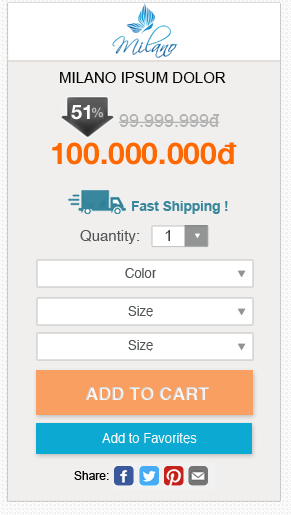
<style>
.page{position:relative;width:291px;height:515px;background:#f0efee}
.page>*{position:absolute;margin:0}
.t1{font:15px "ArialMT";color:#020202;text-transform:uppercase}
.t2{font:20px "HelveticaNeue-Bold";color:#ffffff}
.t3{font:13px "HelveticaNeue-Bold";color:#bcbcbc}
.t4{font:18px "ArialMT";color:#b3b2b2}
.t5{font:30px "HelveticaNeue-Bold";color:#ff6800}
.t6{font:13.5px "Arial-BoldMT";color:#3a879c}
.t7{font:15px "Helvetica";color:#515555}
.t8{font:15px "ArialMT";color:#343434}
.t9{font:13px "Helvetica";color:#515555}
.t10{font:18px "Helvetica-Bold";color:#ffffff}
.t11{font:13px "Helvetica";color:#ffffff}
.t12{font:12px "ArialMT";color:#030303}
</style>
<div class="page">
<p class="t1" style="left:60px;top:72px;width:166px;height:11px">milano ipsum dolor</p>
<p class="t2" style="left:71px;top:105px;width:19px;height:15px">51</p>
<p class="t3" style="left:91px;top:107px;width:13px;height:11px">%</p>
<p class="t4" style="left:119px;top:114px;width:101px;height:13px">99.999.999đ</p>
<p class="t5" style="left:52px;top:142px;width:185px;height:23px">100.000.000đ</p>
<p class="t6" style="left:132px;top:201px;width:96px;height:13px">Fast Shipping !</p>
<p class="t7" style="left:80px;top:230px;width:60px;height:14px">Quantity:</p>
<p class="t8" style="left:165px;top:230px;width:5px;height:11px">1</p>
<p class="t9" style="left:125px;top:268px;width:31px;height:10px">Color</p>
<p class="t9" style="left:128px;top:306px;width:25px;height:11px">Size</p>
<p class="t9" style="left:128px;top:340px;width:25px;height:11px">Size</p>
<p class="t10" style="left:85px;top:387px;width:124px;height:13px">ADD TO CART</p>
<p class="t11" style="left:102px;top:433px;width:95px;height:11px">Add to Favorites</p>
<p class="t12" style="left:74px;top:471px;width:35px;height:9px">Share:</p>
</div>
